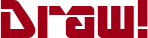
<style>
.page{position:relative;width:148px;height:38px;background:#9f0017}
.page>*{position:absolute;margin:0}
.t1{font:60px "ARDESTINE";color:#9f0017}
</style>
<div class="page">
<p class="t1" style="left:0px;top:0px;width:148px;height:38px">Draw!</p>
</div>
